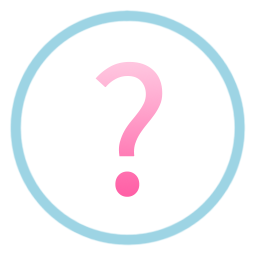
<style>
.page{position:relative;width:256px;height:256px;background:#ffffff}
.page>*{position:absolute;margin:0}
.t1{font:192.6px "SourceSansPro-Regular";font-weight:bold}
</style>
<div class="page">
<p class="t1" style="left:95px;top:61px;width:68px;height:136px">?</p>
</div>
